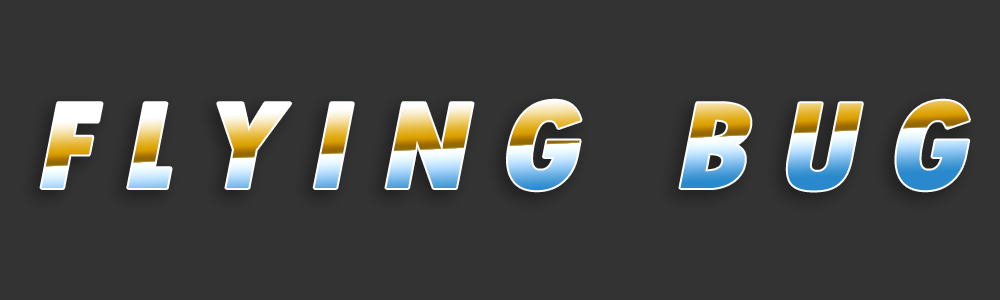
<style>
.page{position:relative;width:1000px;height:300px;background:#333333}
.page>*{position:absolute;margin:0}
.t1{font:130px "TwCenMT-CondensedExtraBold";letter-spacing:0.205em;font-style:italic;scale:1.11 1}
</style>
<div class="page">
<p class="t1" style="left:41px;top:100px;width:928px;height:91px">FLYING BUG</p>
</div>
